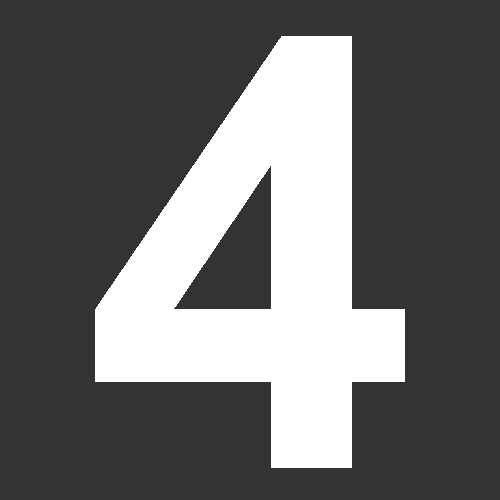
<style>
.page{position:relative;width:500px;height:500px;background:#333333}
.page>*{position:absolute;margin:0}
.t1{font:600px "Arial-BoldMT";color:#ffffff}
</style>
<div class="page">
<p class="t1" style="left:95px;top:36px;width:310px;height:432px">4</p>
</div>
